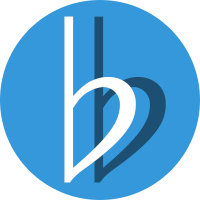
<style>
.page{position:relative;width:200px;height:200px;background:#3498db}
.page>*{position:absolute;margin:0}
.t1{font:186.8px "HiraKakuPro-W3";letter-spacing:-0.05em;color:#ffffff}
</style>
<div class="page">
<p class="t1" style="left:64px;top:16px;width:72px;height:167px">♭</p>
</div>
